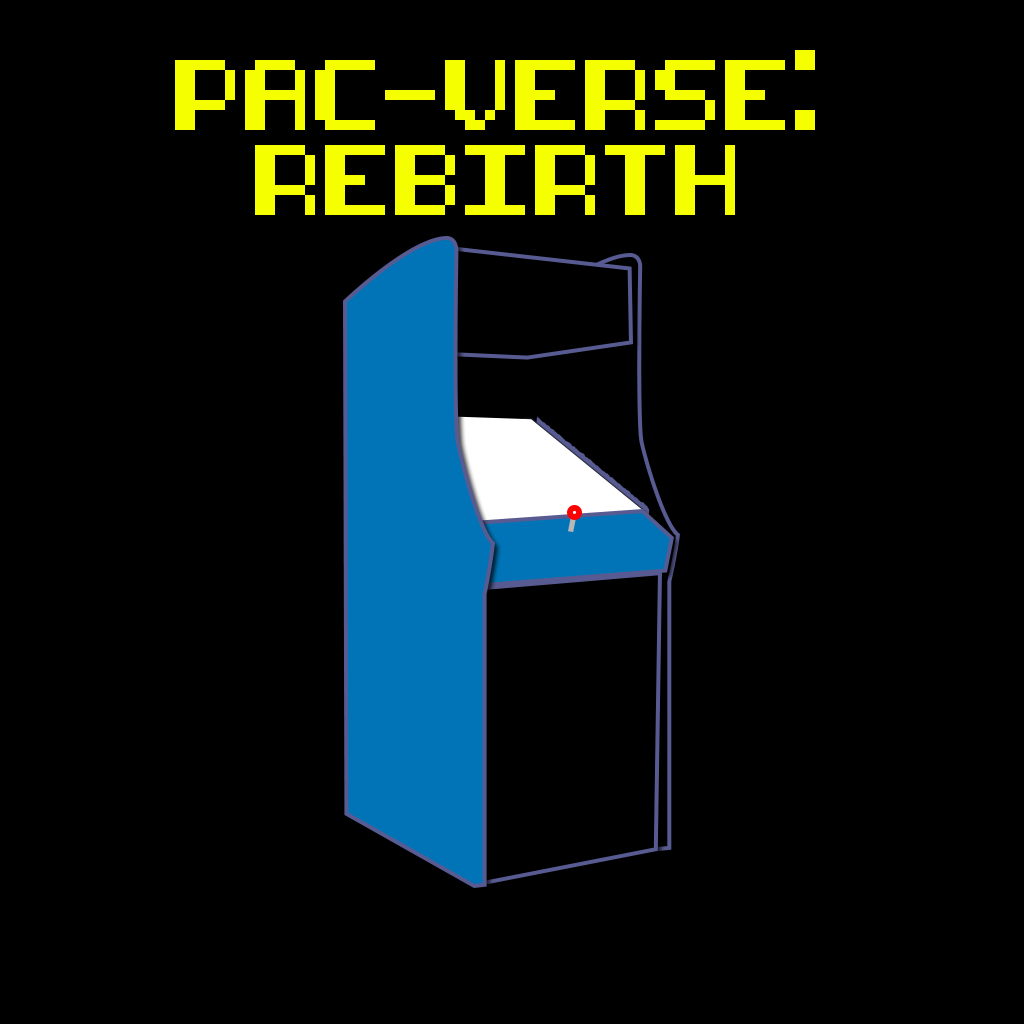
<style>
.page{position:relative;width:1024px;height:1024px;background:#000000}
.page>*{position:absolute;margin:0}
.t1{font:60px/84.5px "8-bit-pusab";color:#f6ff00}
</style>
<div class="page">
<p class="t1" style="left:175px;top:50px;width:640px;height:165px;text-align:center">PAC-VERSE:<br>REBIRTH</p>
</div>
